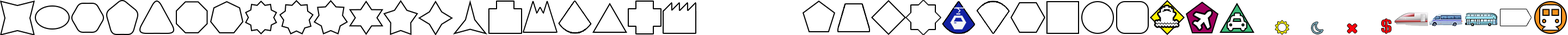
<style>
.page{position:relative;width:1568px;height:35px;background:#ffffff}
.page>*{position:absolute;margin:0}
.t1{font:21.3px "Chalkyer";letter-spacing:-0.06em;color:#fe000c}
</style>
<div class="page">
<p class="t1" style="left:1382px;top:19px;width:9px;height:14px">$</p>
</div>
